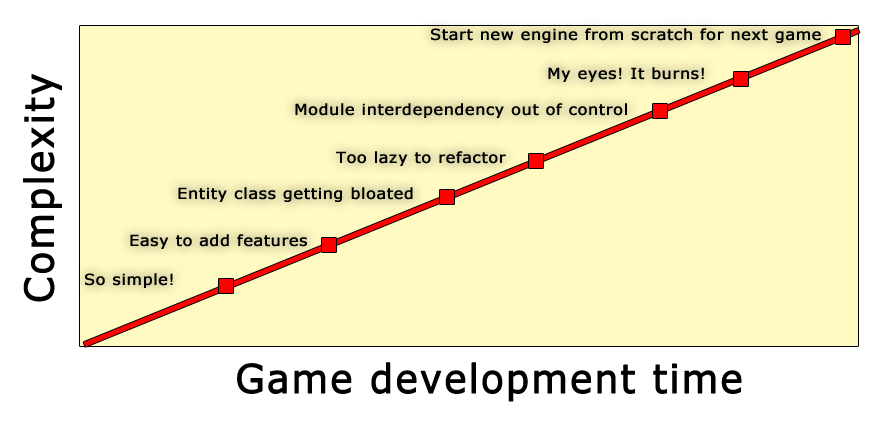
<style>
.page{position:relative;width:881px;height:421px;background:#fff9c2}
.page>*{position:absolute;margin:0}
.t1{font:14.9px "Verdana";letter-spacing:0.025em;color:#000000;font-weight:bold;scale:1.05 1}
.t2{font:37.8px "Verdana";letter-spacing:0.025em;color:#000000;font-weight:bold;scale:1.05 1}
</style>
<div class="page">
<p class="t1" style="left:431px;top:28px;width:390px;height:15px">Start new engine from scratch for next game</p>
<p class="t2" style="left:23px;top:74px;width:39px;height:228px;rotate:180deg">Complexity</p>
<p class="t1" style="left:548px;top:67px;width:156px;height:15px">My eyes! It burns!</p>
<p class="t1" style="left:295px;top:103px;width:332px;height:15px">Module interdependency out of control</p>
<p class="t1" style="left:336px;top:151px;width:170px;height:15px">Too lazy to refactor</p>
<p class="t1" style="left:178px;top:187px;width:235px;height:15px">Entity class getting bloated</p>
<p class="t1" style="left:130px;top:234px;width:177px;height:15px">Easy to add features</p>
<p class="t1" style="left:85px;top:273px;width:88px;height:15px">So simple!</p>
<p class="t2" style="left:237px;top:362px;width:505px;height:40px;rotate:-90deg">Game development time</p>
</div>
